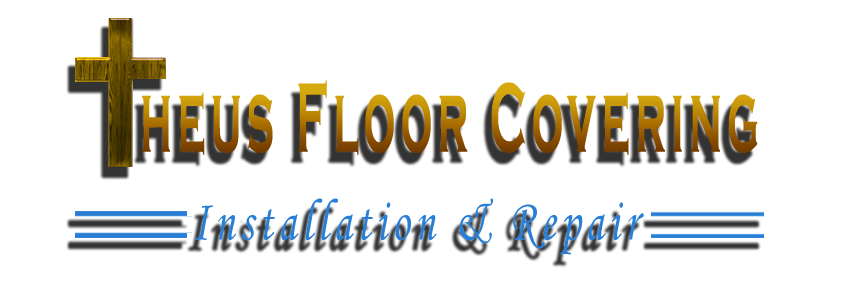
<style>
.page{position:relative;width:866px;height:283px;background:#ffffff}
.page>*{position:absolute;margin:0}
.t1{font:102.3px "CopperplateGothic-Bold";letter-spacing:0.12em;scale:0.43 1}
.t2{font:59.6px "MonotypeCorsiva";letter-spacing:0.12em;color:#287fd5;scale:0.73 1}
</style>
<div class="page">
<p class="t1" style="left:142px;top:80px;width:616px;height:75px">heus Floor Covering</p>
<p class="t2" style="left:195px;top:198px;width:449px;height:57px">Installation &amp; Repair</p>
</div>
